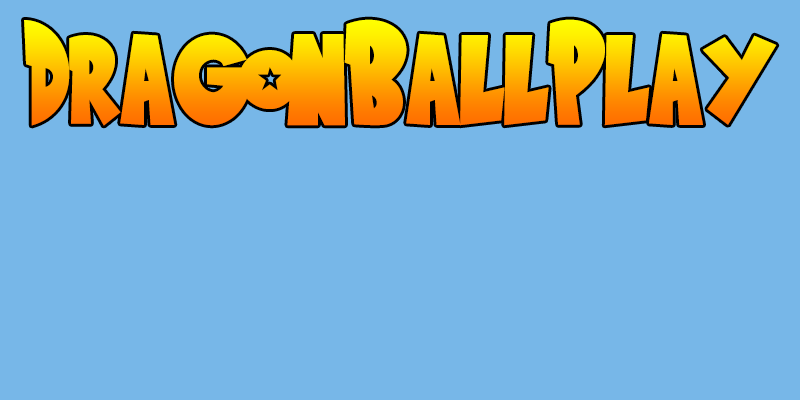
<style>
.page{position:relative;width:800px;height:400px;background:#77b7e8}
.page>*{position:absolute;margin:0}
.t1{font:150px "SaiyanSans"}
</style>
<div class="page">
<p class="t1" style="left:24px;top:19px;width:753px;height:107px">DragonBallPlay</p>
</div>
